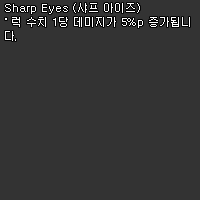
<style>
.page{position:relative;width:200px;height:200px;background:#333333}
.page>*{position:absolute;margin:0}
.t1{font:11px/14px "Dotum";color:#ffffff}
</style>
<div class="page">
<p class="t1" style="left:5px;top:3px;width:185px;height:38px">Sharp Eyes (샤프 아이즈)<br>˚ 럭 수치 1당 데미지가 5%p 증가됩니<br>다.</p>
</div>
